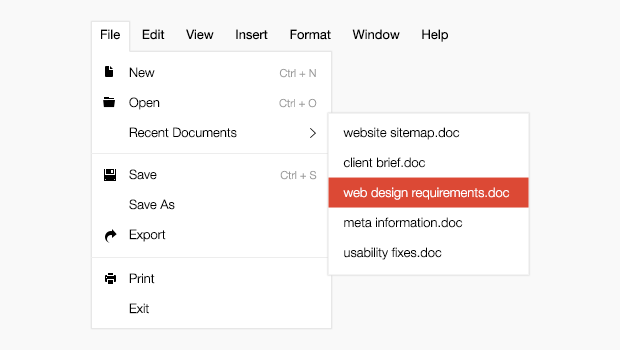
<style>
.page{position:relative;width:620px;height:350px;background:#f9f9f9}
.page>*{position:absolute;margin:0}
.t1{font:13px "HelveticaNeue";color:#000000}
.t2{font:13px/30px "HelveticaNeue-Light";color:#000000}
.t3{font:11px/30px "HelveticaNeue-Light";color:#999999}
.t4{font:13px/30px "HelveticaNeue-Light";color:#ffffff}
.t5{font:11px "HelveticaNeue-Light";color:#999999}
</style>
<div class="page">
<p class="t1" style="left:101px;top:29px;width:347px;height:13px">File      Edit      View      Insert      Format      Window      Help</p>
<p class="t2" style="left:129px;top:67px;width:108px;height:71px">New<br>Open<br>Recent Documents</p>
<p class="t3" style="left:279px;top:68px;width:38px;height:40px;text-align:right">Ctrl + N<br>Ctrl + O</p>
<p class="t2" style="left:343px;top:127px;width:167px;height:133px">website sitemap.doc<br>client brief.doc<br><span class="t4">web design requirements.doc<br></span>meta information.doc<br>usability fixes.doc</p>
<p class="t2" style="left:129px;top:169px;width:46px;height:73px">Save<br>Save As<br>Export</p>
<p class="t5" style="left:280px;top:170px;width:37px;height:10px">Ctrl + S</p>
<p class="t2" style="left:129px;top:273px;width:26px;height:41px">Print<br>Exit</p>
</div>
